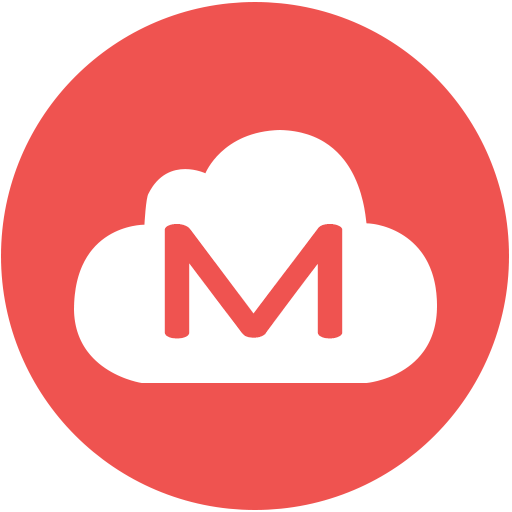
<style>
.page{position:relative;width:512px;height:512px;background:#ef5350}
.page>*{position:absolute;margin:0}
.t1{font:185.4px "PrintBold";color:#ef5350;scale:2.05 1}
</style>
<div class="page">
<p class="t1" style="left:164px;top:224px;width:179px;height:115px">M</p>
</div>
